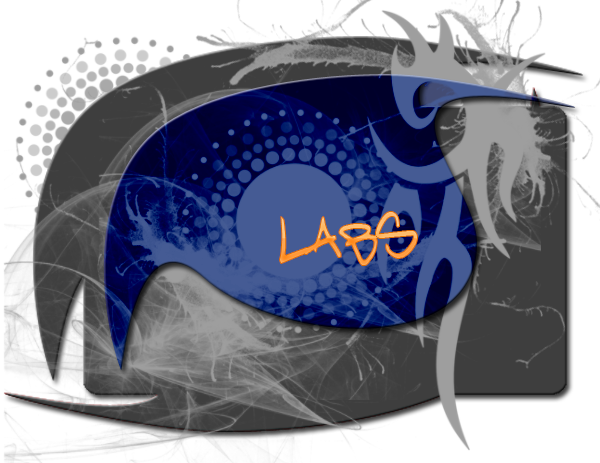
<style>
.page{position:relative;width:600px;height:463px;background:#ffffff}
.page>*{position:absolute;margin:0}
.t1{font:60px "Bringthanoize";letter-spacing:0.05em}
</style>
<div class="page">
<p class="t1" style="left:279px;top:211px;width:139px;height:55px">Labs</p>
</div>
